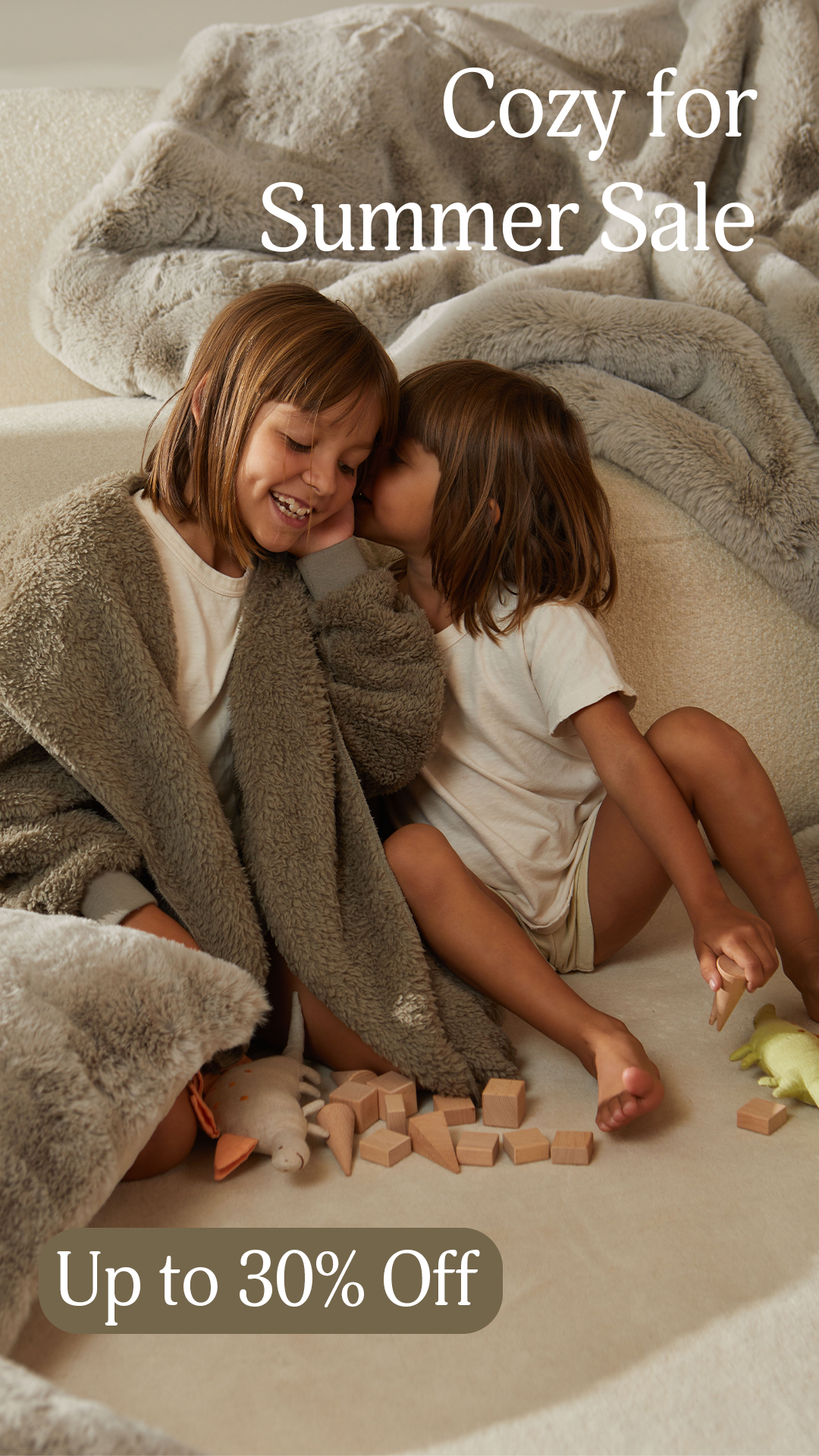
<style>
.page{position:relative;width:819px;height:1456px}
.page>*{position:absolute;margin:0}
.t1{font:94.8px "AdonisC";letter-spacing:-0.02em;color:#ffffff}
.t2{font:75.4px "AdonisC";letter-spacing:-0.02em;color:#ffffff}
</style>
<div class="page">
<p class="t1" style="left:262px;top:67px;width:496px;height:185px;text-align:right">Cozy for Summer Sale</p>
<p class="t2" style="left:57px;top:1250px;width:423px;height:76px">Up to 30% Off</p>
</div>
